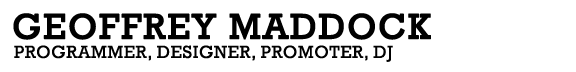
<style>
.page{position:relative;width:576px;height:72px;background:#ffffff}
.page>*{position:absolute;margin:0}
.t1{font:36px "Rockwell";letter-spacing:0.036em;color:#000000;font-weight:bold}
.t2{font:18px "Rockwell";letter-spacing:0.036em;color:#000000}
</style>
<div class="page">
<p class="t1" style="left:13px;top:13px;width:418px;height:27px">GEOFFREY MADDOCK</p>
<p class="t2" style="left:14px;top:45px;width:379px;height:17px">PROGRAMMER, DESIGNER, PROMOTER, DJ</p>
</div>
